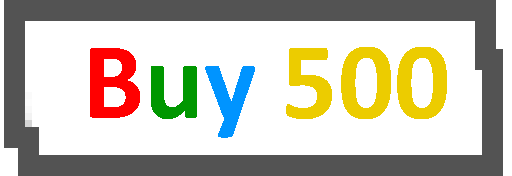
<style>
.page{position:relative;width:512px;height:176px;background:#ffffff}
.page>*{position:absolute;margin:0}
.t1{font:110.7px "Calibri-Bold";color:#eccc00}
.t2{font:110.7px "Calibri-Bold";color:#ff0000}
.t3{font:110.7px "Calibri-Bold";color:#009700}
.t4{font:110.7px "Calibri-Bold";color:#0094ff}
</style>
<div class="page">
<p class="t1" style="left:90px;top:47px;width:357px;height:91px"><span class="t2">B</span><span class="t3">u</span><span class="t4">y </span>500</p>
</div>
